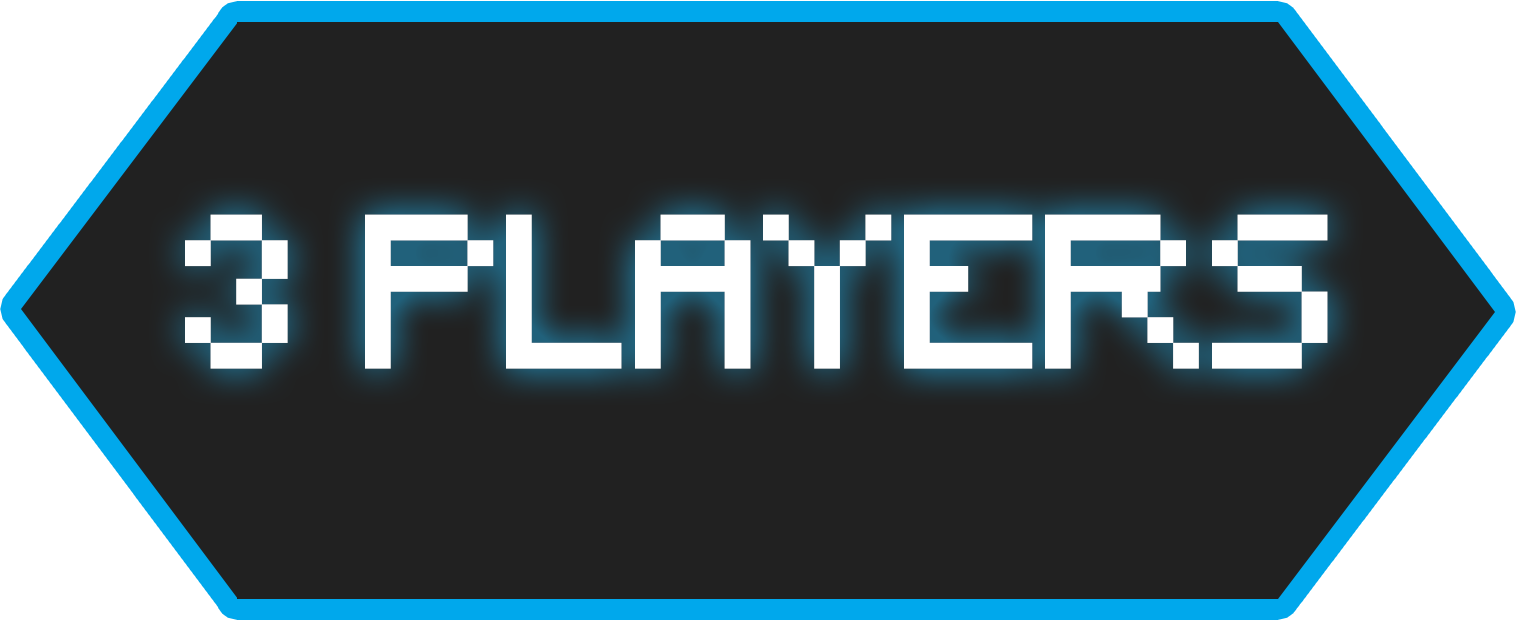
<style>
.page{position:relative;width:1516px;height:621px;background:#212121}
.page>*{position:absolute;margin:0}
.t1{font:205.3px "Minecraft";color:#ffffff}
</style>
<div class="page">
<p class="t1" style="left:185px;top:214px;width:1143px;height:155px">3 PLAYERS</p>
</div>
